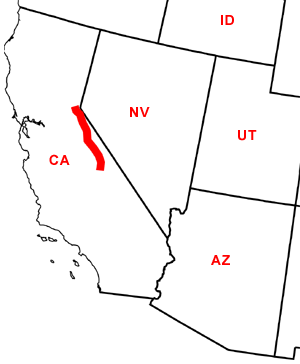
<style>
.page{position:relative;width:300px;height:364px;background:#ffffff}
.page>*{position:absolute;margin:0}
.t1{font:14px "Arial-BoldMT";letter-spacing:0.05em;color:#ff0000}
</style>
<div class="page">
<p class="t1" style="left:221px;top:15px;width:13px;height:10px">ID</p>
<p class="t1" style="left:130px;top:107px;width:20px;height:10px">NV</p>
<p class="t1" style="left:238px;top:130px;width:19px;height:11px">UT</p>
<p class="t1" style="left:49px;top:154px;width:21px;height:11px">CA</p>
<p class="t1" style="left:211px;top:255px;width:19px;height:10px">AZ</p>
</div>
